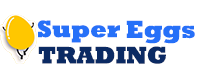
<style>
.page{position:relative;width:200px;height:70px;background:#ffffff}
.page>*{position:absolute;margin:0}
.t1{font:24.1px "Rockwell-ExtraBold";color:#2670f8}
.t2{font:25px "Rockwell-ExtraBold";color:#2670f8;scale:0.95 1}
.t3{font:24.3px "Rockwell-ExtraBold";color:#0b2a63}
</style>
<div class="page">
<p class="t1" style="left:37px;top:20px;width:83px;height:23px">Super</p>
<p class="t2" style="left:126px;top:20px;width:69px;height:24px">Eggs</p>
<p class="t3" style="left:38px;top:46px;width:128px;height:18px">TRADING</p>
</div>
